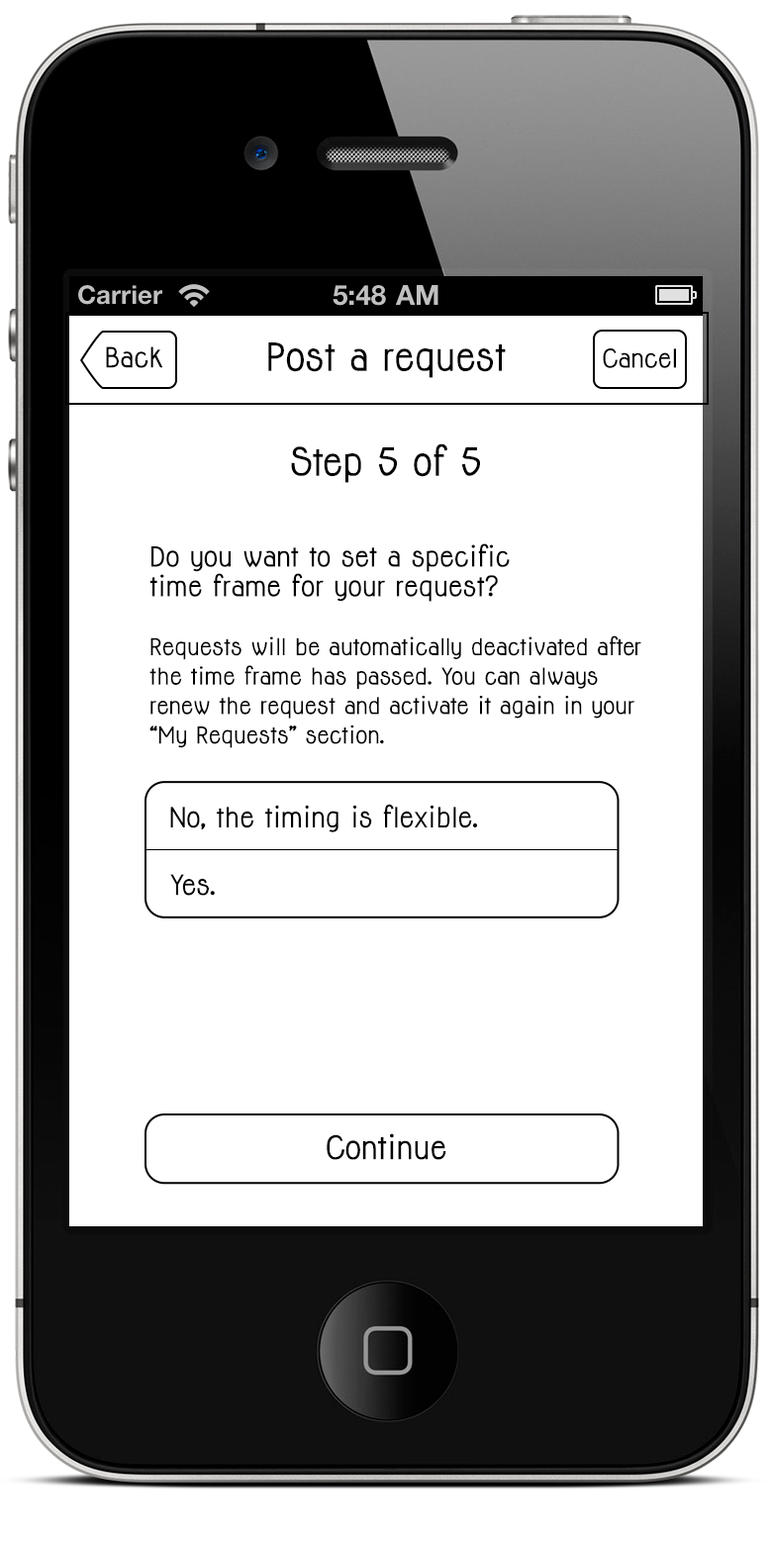
<style>
.page{position:relative;width:772px;height:1545px;background:#ffffff}
.page>*{position:absolute;margin:0}
.t1{font:25.7px "Jolly-Bold";color:#000000}
.t2{font:35.6px "Jolly-Bold";color:#000000}
.t3{font:23.8px "Jolly-Bold";color:#000000}
.t4{font:21.6px/29.5px "Jolly-Bold";color:#000000}
.t5{font:25.5px/29.5px "Jolly-Bold";color:#000000}
.t6{font:29.8px "Jolly-Bold";color:#000000}
</style>
<div class="page">
<p class="t1" style="left:106px;top:346px;width:57px;height:22px">Back</p>
<p class="t2" style="left:268px;top:342px;width:238px;height:36px">Post a request</p>
<p class="t3" style="left:603px;top:348px;width:73px;height:20px">Cancel</p>
<p class="t2" style="left:291px;top:443px;width:189px;height:40px">Step 5 of 5</p>
<p class="t4" style="left:149px;top:543px;width:492px;height:205px"><span class="t5">Do you want to set a specific <br>time frame for your request?<br><br></span>Requests will be automatically deactivated after the time frame has passed. You can always renew the request and activate it again in your “My Requests” section.</p>
<p class="t1" style="left:170px;top:804px;width:308px;height:28px">No, the timing is flexible.</p>
<p class="t1" style="left:170px;top:874px;width:45px;height:22px">Yes.</p>
<p class="t6" style="left:327px;top:1133px;width:119px;height:27px">Continue</p>
</div>
